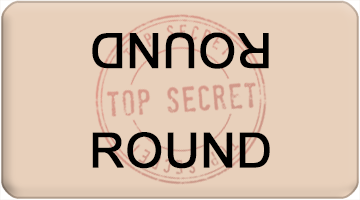
<style>
.page{position:relative;width:360px;height:200px;background:#e8d0bb}
.page>*{position:absolute;margin:0}
.t1{font:48px "ArialMT";color:#000000;font-weight:bold}
</style>
<div class="page">
<p class="t1" style="left:92px;top:32px;width:177px;height:37px;rotate:180deg">ROUND</p>
<p class="t1" style="left:92px;top:132px;width:178px;height:37px">ROUND</p>
</div>
